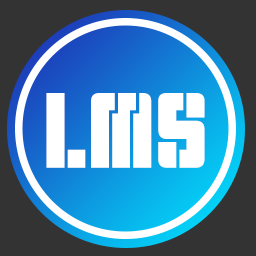
<style>
.page{position:relative;width:256px;height:256px;background:#333333}
.page>*{position:absolute;margin:0}
.t1{font:100px "CameronStendahl";color:#ffffff}
</style>
<div class="page">
<p class="t1" style="left:46px;top:93px;width:159px;height:75px">LMS</p>
</div>
